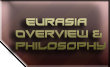
<style>
.page{position:relative;width:110px;height:67px}
.page>*{position:absolute;margin:0}
.t1{font:10px "Xirod-Regular";scale:0.96 1}
.t2{font:9.1px "Xirod-Regular";scale:0.96 1}
</style>
<div class="page">
<p class="t1" style="left:15px;top:18px;width:91px;height:32px"><span class="t2">    </span>EURASIA <br> OVERVIEW &amp;<br> PHILOSOPHY</p>
</div>
